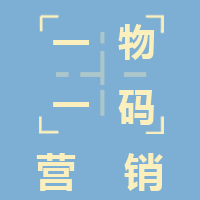
<style>
.page{position:relative;width:200px;height:200px;background:#7dafd5}
.page>*{position:absolute;margin:0}
.t1{font:38px "MicrosoftYaHei-Bold";letter-spacing:0.2em;color:#fbefbd}
.t2{font:40px "MicrosoftYaHei-Bold";letter-spacing:0.2em;color:#fbefbd}
</style>
<div class="page">
<p class="t1" style="left:118px;top:24px;width:37px;height:36px">物</p>
<p class="t1" style="left:53px;top:40px;width:36px;height:5px">一</p>
<p class="t1" style="left:53px;top:102px;width:36px;height:5px">一</p>
<p class="t1" style="left:118px;top:90px;width:36px;height:35px">码</p>
<p class="t2" style="left:36px;top:153px;width:127px;height:38px">营  销</p>
</div>
